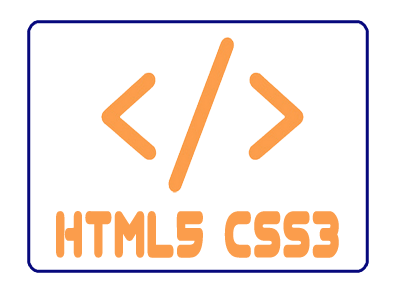
<style>
.page{position:relative;width:400px;height:300px;background:#ffffff}
.page>*{position:absolute;margin:0}
.t1{font:57.2px "Virgo01";color:#fb9d4c;font-weight:bold;scale:0.63 1}
</style>
<div class="page">
<p class="t1" style="left:56px;top:211px;width:283px;height:47px">HTML5 CSS3</p>
</div>
